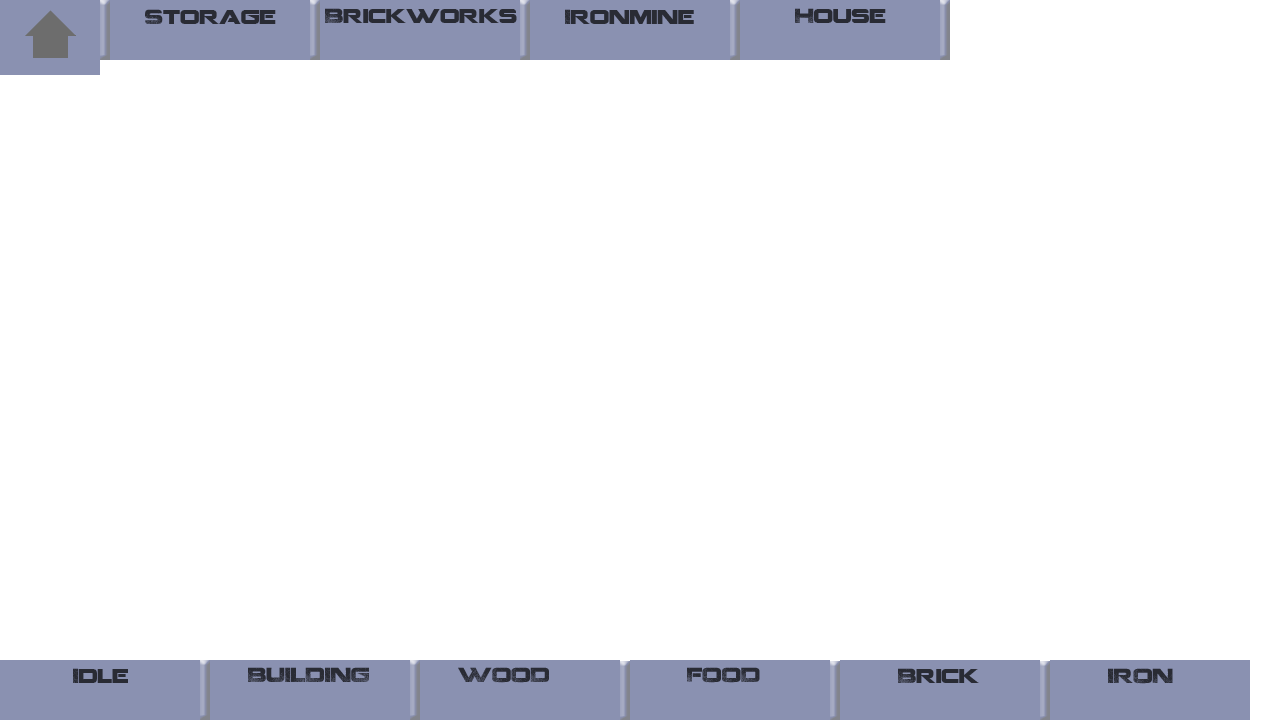
<style>
.page{position:relative;width:1280px;height:720px;background:#ffffff}
.page>*{position:absolute;margin:0}
.t1{font:20px "Coalition";color:#292b34}
</style>
<div class="page">
<p class="t1" style="left:145px;top:9px;width:131px;height:15px">Storage</p>
<p class="t1" style="left:325px;top:8px;width:192px;height:15px">Brickworks</p>
<p class="t1" style="left:565px;top:9px;width:129px;height:15px">Ironmine</p>
<p class="t1" style="left:795px;top:8px;width:91px;height:15px">House</p>
<p class="t1" style="left:73px;top:668px;width:55px;height:15px">Idle</p>
<p class="t1" style="left:248px;top:667px;width:121px;height:15px">BUILDING</p>
<p class="t1" style="left:458px;top:667px;width:91px;height:16px">WOOD</p>
<p class="t1" style="left:687px;top:667px;width:73px;height:16px">FOOD</p>
<p class="t1" style="left:898px;top:668px;width:81px;height:15px">Brick</p>
<p class="t1" style="left:1108px;top:668px;width:65px;height:16px">IRON</p>
</div>
